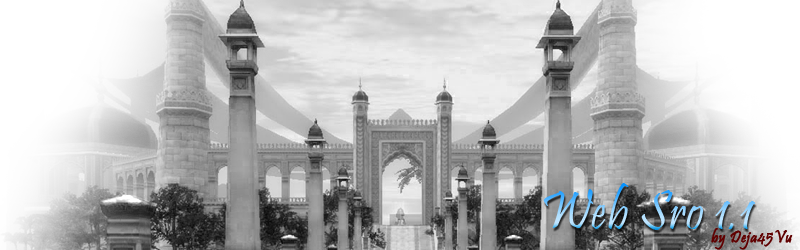
<style>
.page{position:relative;width:800px;height:250px}
.page>*{position:absolute;margin:0}
.t1{font:55.2px "Pristina-Regular";letter-spacing:0.02em;scale:0.93 1}
.t2{font:17.4px "Pristina-Regular";letter-spacing:0.02em;color:#600000;font-weight:bold;scale:0.94 1}
</style>
<div class="page">
<p class="t1" style="left:543px;top:183px;width:213px;height:47px">Web Sro 1.1</p>
<p class="t2" style="left:711px;top:228px;width:82px;height:22px">by Deja45Vu</p>
</div>
